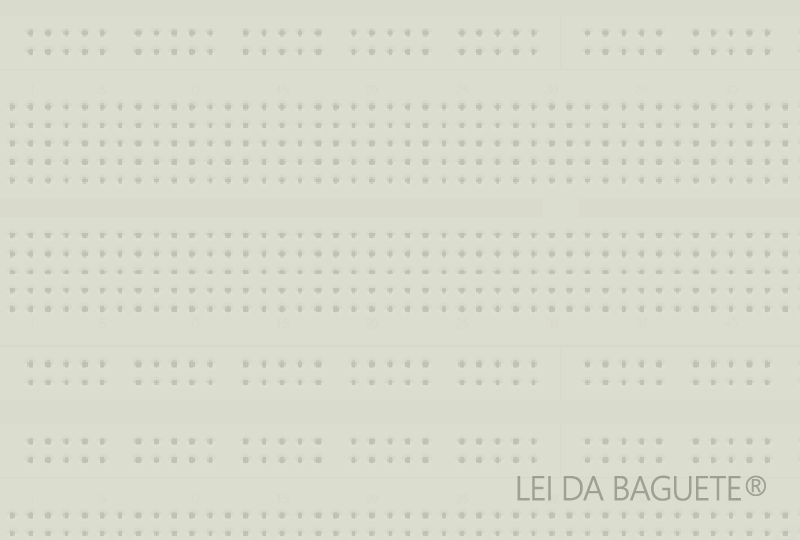
<style>
.page{position:relative;width:800px;height:540px;background:#dbddce}
.page>*{position:absolute;margin:0}
.t1{font:59.1px "LeelawadeeUI-Semilight";letter-spacing:-0.06em;color:#9fa195;font-weight:bold}
</style>
<div class="page">
<p class="t1" style="left:517px;top:475px;width:249px;height:26px">LEI DA BAGUETE®</p>
</div>
